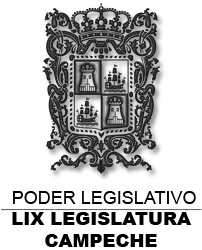
<style>
.page{position:relative;width:202px;height:250px;background:#ffffff}
.page>*{position:absolute;margin:0}
.t1{font:18px "ArialMT";color:#000000}
.t2{font:18px "Arial-Black";color:#000000}
</style>
<div class="page">
<p class="t1" style="left:13px;top:191px;width:183px;height:13px">PODER LEGISLATIVO</p>
<p class="t2" style="left:12px;top:212px;width:180px;height:35px;text-align:center">LIX LEGISLATURA<br>CAMPECHE</p>
</div>
